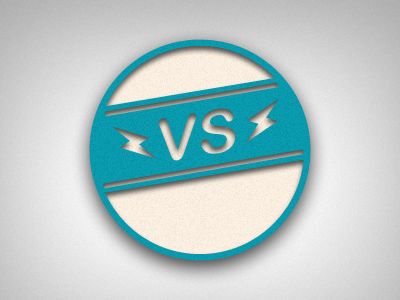
<style>
.page{position:relative;width:400px;height:300px}
.page>*{position:absolute;margin:0}
.t1{font:59.9px "ArialRoundedMTBold";text-transform:uppercase}
</style>
<div class="page">
<p class="t1" style="left:158px;top:108px;width:78px;height:53px;rotate:-10deg">VS</p>
</div>
